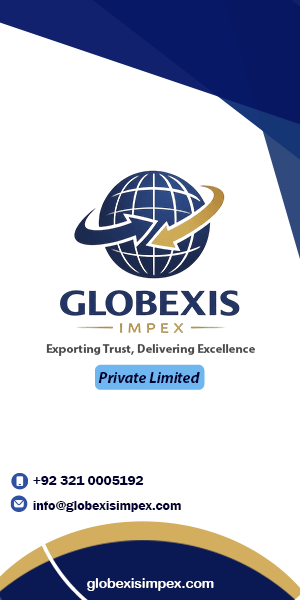
<style>
.page{position:relative;width:300px;height:600px;background:#ffffff}
.page>*{position:absolute;margin:0}
.t1{font:12.5px "MyriadPro-Bold";color:#4a4a4b}
.t2{font:15.4px "MyriadPro-BoldIt";color:#030235}
.t3{font:13.7px "FranklinGothic-Demi";color:#030235}
.t4{font:13.7px "ArialRoundedMTBold";color:#ffffff}
</style>
<div class="page">
<p class="t1" style="left:46px;top:344px;width:209px;height:12px">Exporting Trust, Delivering Excellence</p>
<p class="t2" style="left:98px;top:372px;width:102px;height:11px">Private Limited</p>
<p class="t3" style="left:33px;top:475px;width:111px;height:10px">+92 321 0005192</p>
<p class="t3" style="left:33px;top:501px;width:148px;height:11px">info@globexisimpex.com</p>
<p class="t4" style="left:87px;top:578px;width:127px;height:13px">globexisimpex.com</p>
</div>
